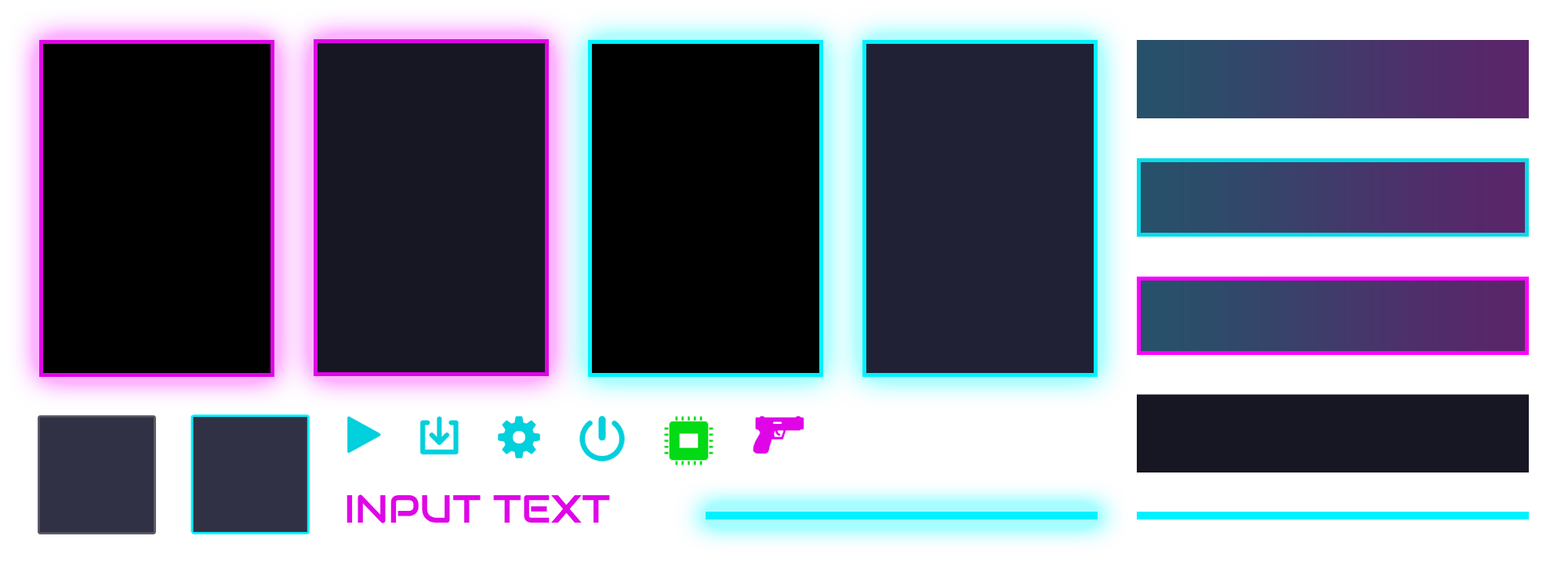
<style>
.page{position:relative;width:1568px;height:572px;background:#ffffff}
.page>*{position:absolute;margin:0}
.t1{font:39.2px "Audiowide-Regular";color:#df05e7}
</style>
<div class="page">
<p class="t1" style="left:347px;top:495px;width:263px;height:29px">INPUT TEXT</p>
</div>
